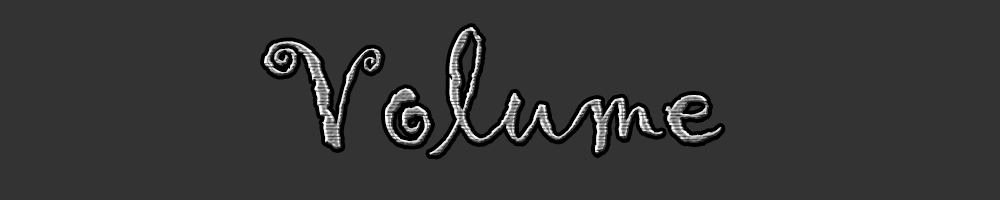
<style>
.page{position:relative;width:1000px;height:200px;background:#333333}
.page>*{position:absolute;margin:0}
.t1{font:148.2px "Gigi-Regular"}
</style>
<div class="page">
<p class="t1" style="left:264px;top:27px;width:458px;height:129px">Volume</p>
</div>
